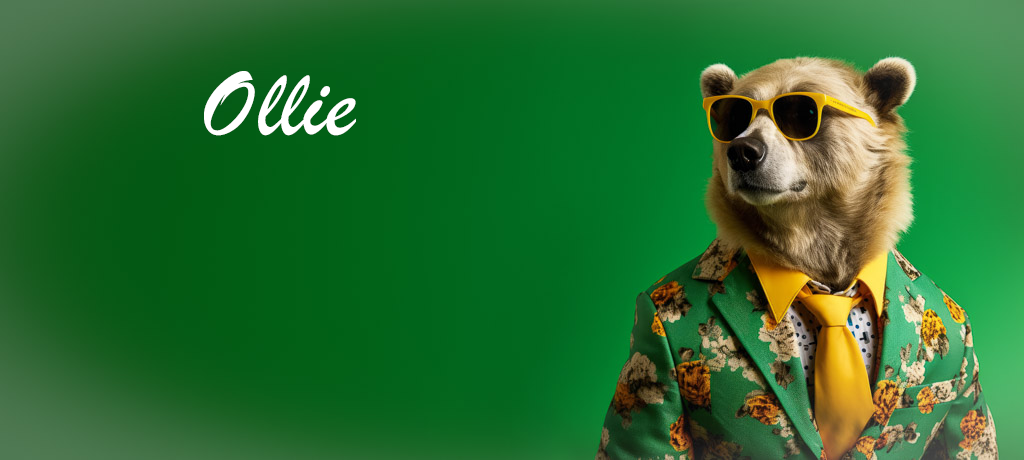
<style>
.page{position:relative;width:1024px;height:460px}
.page>*{position:absolute;margin:0}
.t1{font:100px "BrushScriptMT";color:#ffffff}
</style>
<div class="page">
<p class="t1" style="left:204px;top:71px;width:152px;height:65px">Ollie</p>
</div>
